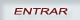
<style>
.page{position:relative;width:80px;height:20px}
.page>*{position:absolute;margin:0}
.t1{font:9px "ArialMT";color:#6f1b1b;scale:1.45 1}
</style>
<div class="page">
<p class="t1" style="left:14px;top:8px;width:54px;height:7px">ENTRAR</p>
</div>
